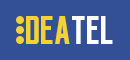
<style>
.page{position:relative;width:130px;height:60px;background:#334f95}
.page>*{position:absolute;margin:0}
.t1{font:40px "ReckonerBold";color:#f3d231}
.t2{font:40px "ReckonerBold";color:#ffffff}
</style>
<div class="page">
<p class="t1" style="left:26px;top:16px;width:87px;height:28px">DEA<span class="t2">TEL</span></p>
</div>
